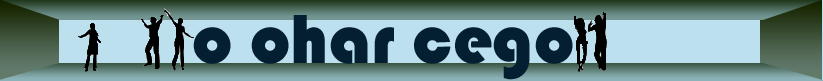
<style>
.page{position:relative;width:823px;height:81px;background:#bce0ed}
.page>*{position:absolute;margin:0}
.t1{font:72px "Bauhaus93";color:#041f31}
</style>
<div class="page">
<p class="t1" style="left:193px;top:15px;width:380px;height:65px">o ohar cego</p>
</div>
